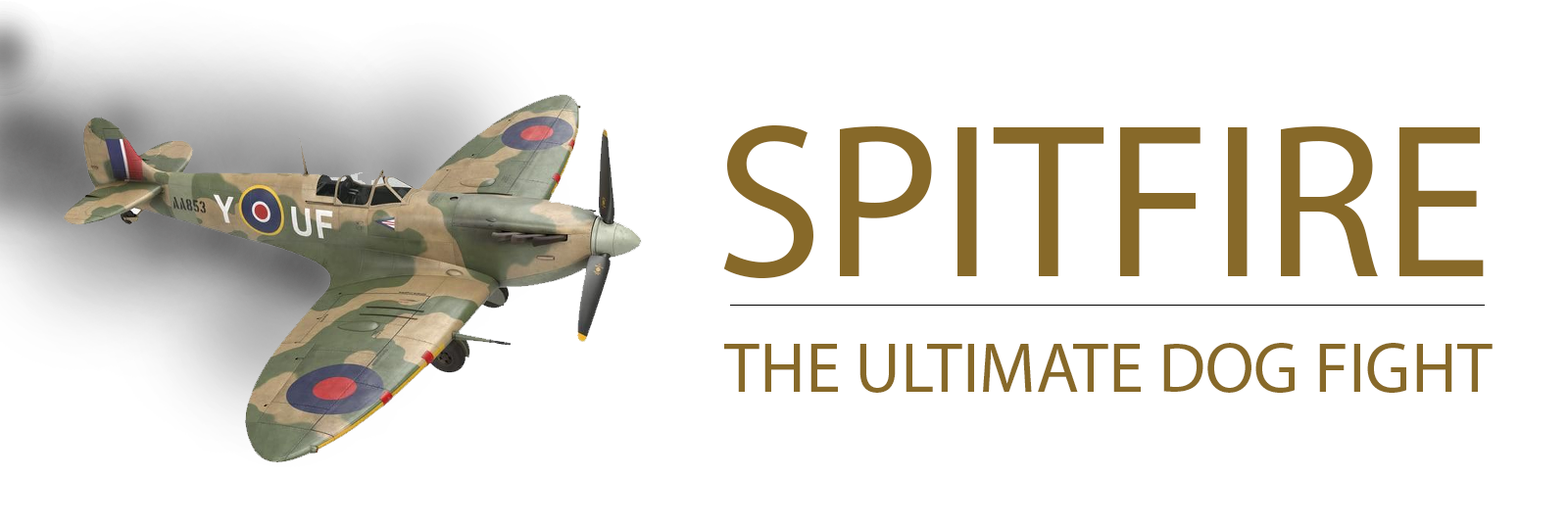
<style>
.page{position:relative;width:1568px;height:525px;background:#ffffff}
.page>*{position:absolute;margin:0}
.t1{font:221px "MyriadPro-Regular";color:#876929}
.t2{font:70.6px "MyriadPro-Regular";color:#876929}
</style>
<div class="page">
<p class="t1" style="left:723px;top:125px;width:761px;height:153px">SPITFIRE</p>
<p class="t2" style="left:724px;top:343px;width:769px;height:50px">THE ULTIMATE DOG FIGHT</p>
</div>
